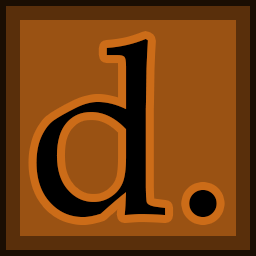
<style>
.page{position:relative;width:256px;height:256px;background:#9a5213}
.page>*{position:absolute;margin:0}
.t1{font:240px "BookAntiqua";color:#000000}
</style>
<div class="page">
<p class="t1" style="left:36px;top:39px;width:181px;height:178px">d.</p>
</div>
